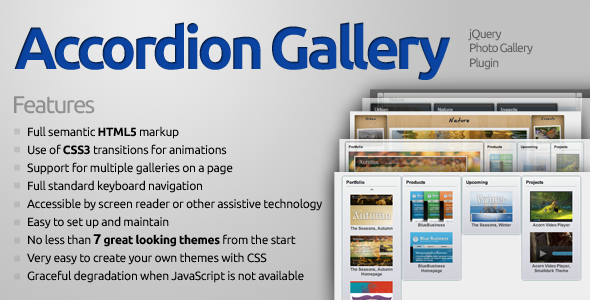
<style>
.page{position:relative;width:590px;height:300px}
.page>*{position:absolute;margin:0}
.t1{font:60px "Ubuntu-Bold";letter-spacing:-0.075em;color:#0b43a0}
.t2{font:12px "Ubuntu-Regular";letter-spacing:-0.075em;color:#606060}
.t3{font:24px "Ubuntu-Regular";letter-spacing:-0.075em;color:#909090}
.t4{font:12px/18px "Ubuntu-Regular";letter-spacing:-0.025em;color:#000000}
.t5{font:12px/18px "Ubuntu-Bold";letter-spacing:-0.025em;color:#000000}
.t6{font:14px/18px "Ubuntu-Bold";letter-spacing:-0.025em;color:#000000}
</style>
<div class="page">
<p class="t1" style="left:14px;top:22px;width:437px;height:58px">Accordion Gallery</p>
<p class="t2" style="left:468px;top:29px;width:65px;height:41px">jQuery <br>Photo Gallery <br>Plugin</p>
<p class="t3" style="left:14px;top:96px;width:81px;height:18px">Features</p>
<p class="t4" style="left:27px;top:126px;width:295px;height:157px">Full semantic <span class="t5">HTML5</span> markup<br>Use of <span class="t5">CSS3</span> transitions for animations<br>Support for multiple galleries on a page<br>Full standard keyboard navigation<br>Accessible by screen reader or other assistive technology<br>Easy to set up and maintain<br>No less than <span class="t6">7 </span><span class="t5">great looking themes</span> from the start<br>Very easy to create your own themes with CSS<br>Graceful degradation when JavaScript is not available</p>
</div>
